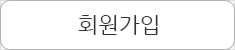
<style>
.page{position:relative;width:235px;height:50px;background:#ffffff}
.page>*{position:absolute;margin:0}
.t1{font:22px "NanumGothic";color:#333333}
</style>
<div class="page">
<p class="t1" style="left:78px;top:15px;width:80px;height:20px">회원가입</p>
</div>
